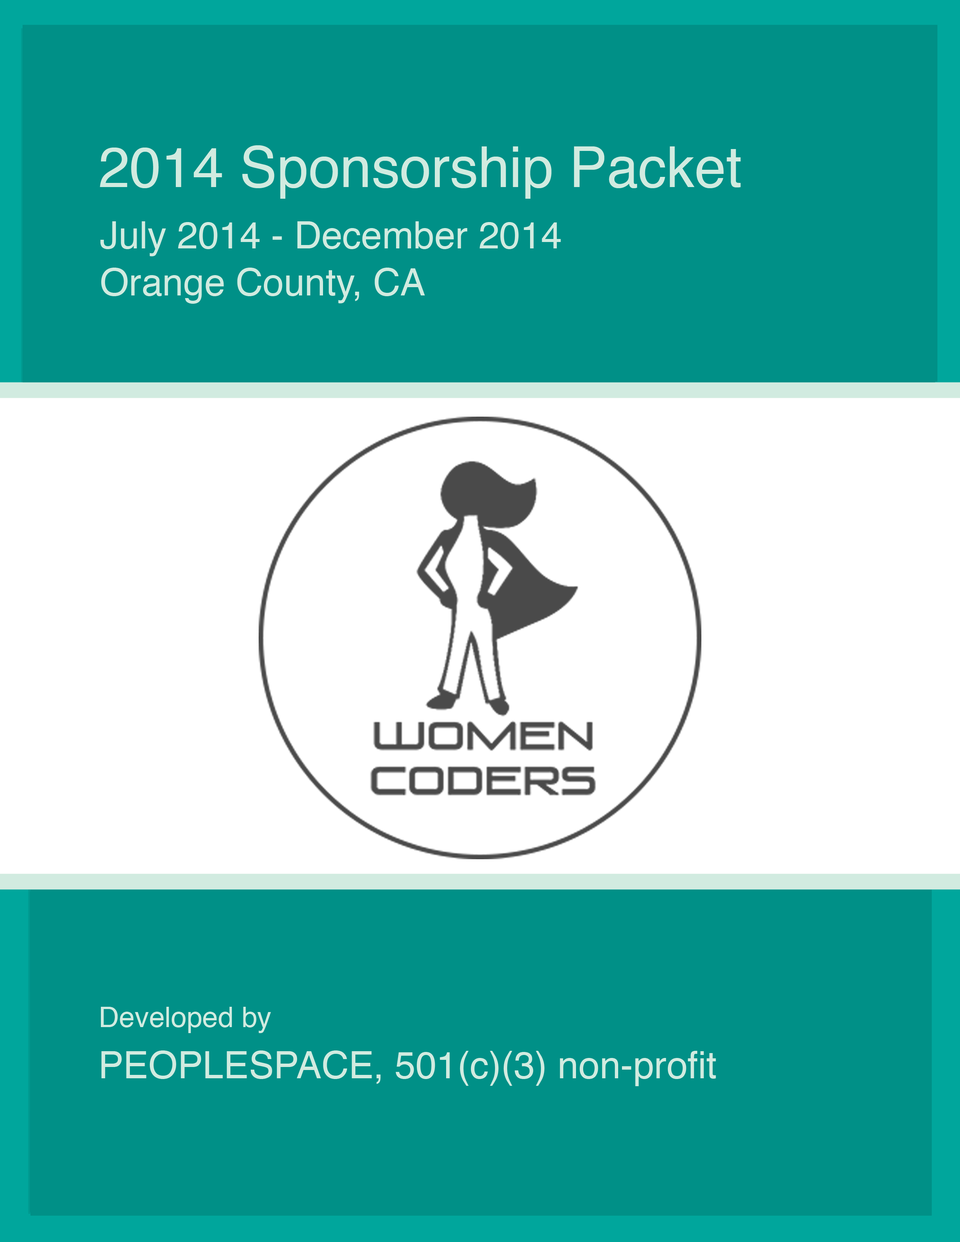
<style>
.page{position:relative;width:960px;height:1242px;background:#009087}
.page>*{position:absolute;margin:0}
.t1{font:56.5px "Helvetica";color:#d1ebe0}
.t2{font:37.6px/47.1px "Helvetica";color:#d1ebe0}
.t3{font:28.2px "Helvetica";color:#d1ebe0}
.t4{font:37.6px "Helvetica";color:#d1ebe0}
</style>
<div class="page">
<p class="t1" style="left:100px;top:145px;width:641px;height:54px">2014 Sponsorship Packet</p>
<p class="t2" style="left:100px;top:221px;width:461px;height:83px">July 2014 - December 2014<br>Orange County, CA</p>
<p class="t3" style="left:101px;top:1007px;width:170px;height:26px">Developed by</p>
<p class="t4" style="left:101px;top:1051px;width:615px;height:35px">PEOPLESPACE, 501(c)(3) non-profit</p>
</div>
